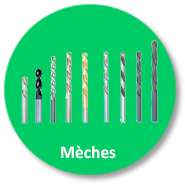
<style>
.page{position:relative;width:185px;height:185px;background:#00cc66}
.page>*{position:absolute;margin:0}
.t1{font:17.8px "Calibri-Bold";color:#ffffff}
</style>
<div class="page">
<p class="t1" style="left:61px;top:145px;width:55px;height:14px">Mèches</p>
</div>
